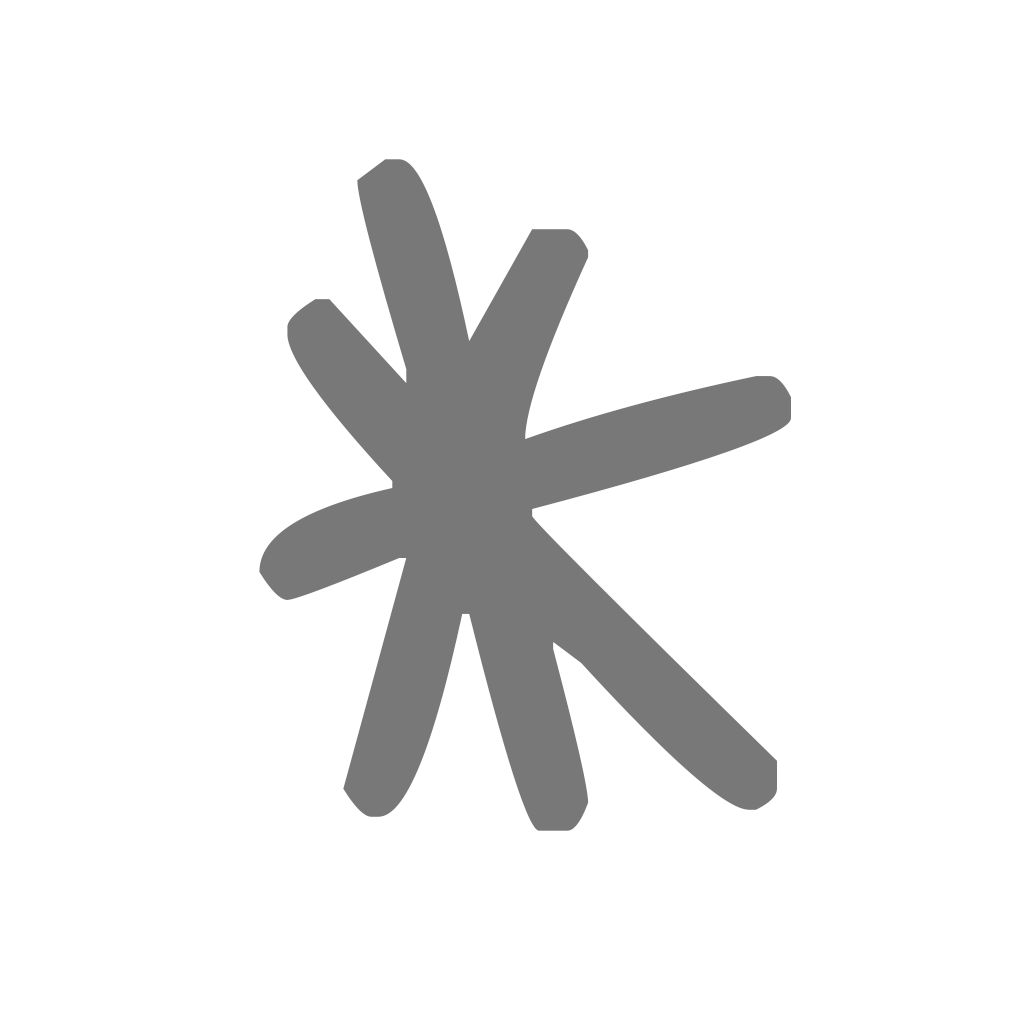
<style>
.page{position:relative;width:1024px;height:1024px;background:#ffffff}
.page>*{position:absolute;margin:0}
.t1{font:3581.5px "MoonFlower";color:#787878}
</style>
<div class="page">
<p class="t1" style="left:259px;top:159px;width:532px;height:672px">*</p>
</div>
